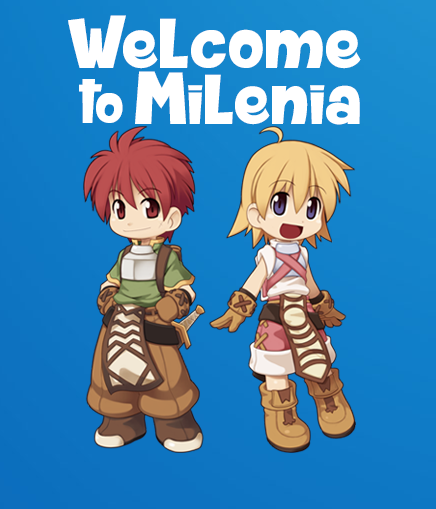
<style>
.page{position:relative;width:436px;height:509px}
.page>*{position:absolute;margin:0}
.t1{font:75.5px "SkaterGirlsRock";color:#ffffff;scale:1.16 1}
.t2{font:59.4px "SkaterGirlsRock";color:#ffffff;scale:1.16 1}
</style>
<div class="page">
<p class="t1" style="left:68px;top:15px;width:293px;height:54px">Welcome</p>
<p class="t1" style="left:135px;top:71px;width:225px;height:54px">Milenia</p>
<p class="t2" style="left:79px;top:79px;width:44px;height:44px">to</p>
</div>
